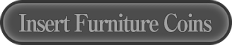
<style>
.page{position:relative;width:232px;height:45px}
.page>*{position:absolute;margin:0}
.t1{font:24px "RyuminPro-ExBold";letter-spacing:-0.08em;color:#a4a4a4;scale:0.9 1}
</style>
<div class="page">
<p class="t1" style="left:19px;top:13px;width:193px;height:19px">Insert Furniture Coins</p>
</div>
